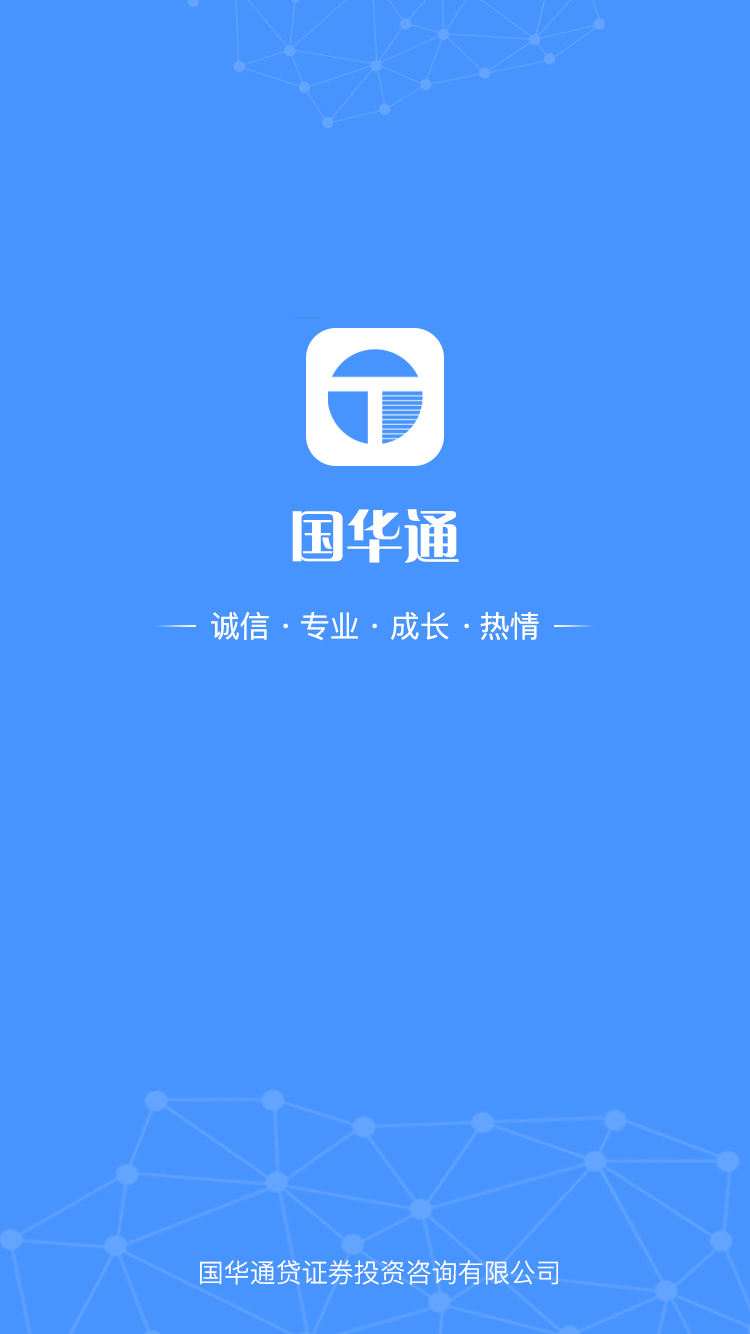
<style>
.page{position:relative;width:750px;height:1334px;background:#4794ff}
.page>*{position:absolute;margin:0}
.t1{font:57px "FZCQK--GBK1-0";color:#ffffff}
.t2{font:30px "PingFang-SC-Medium";color:#ffffff}
.t3{font:26px "PingFang-SC-Regular";color:#ffffff}
</style>
<div class="page">
<p class="t1" style="left:292px;top:509px;width:167px;height:54px">国华通</p>
<p class="t2" style="left:211px;top:611px;width:328px;height:30px">诚信   专业   成长   热情</p>
<p class="t2" style="left:283px;top:623px;width:5px;height:6px">·</p>
<p class="t2" style="left:372px;top:623px;width:5px;height:6px">·</p>
<p class="t2" style="left:464px;top:623px;width:5px;height:6px">·</p>
<p class="t3" style="left:200px;top:1260px;width:358px;height:25px">国华通贷证券投资咨询有限公司</p>
</div>
